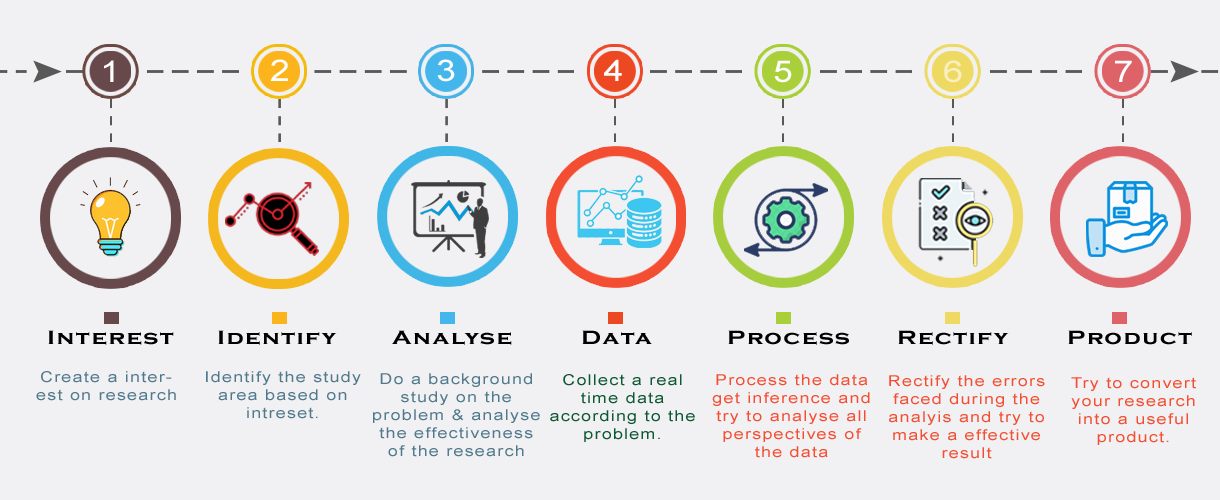
<style>
.page{position:relative;width:1220px;height:500px;background:#f1f1f3}
.page>*{position:absolute;margin:0}
.t1{font:30px "ArialMT";letter-spacing:0.08em;color:#ffffff;scale:1.2 1}
.t2{font:30px "ArialMT";letter-spacing:0.08em;color:#f8f0c1;scale:1.2 1}
.t3{font:20px "CopperplateGothic-Bold";letter-spacing:0.08em;color:#000000;scale:1.2 1}
.t4{font:15px "ArialMT";letter-spacing:0.08em;color:#50798c;scale:1.2 1}
.t5{font:15px "ArialMT";letter-spacing:0.08em;color:#0e5733;scale:1.2 1}
.t6{font:15px "ArialMT";letter-spacing:0.08em;color:#f34e32;scale:1.2 1}
</style>
<div class="page">
<p class="t1" style="left:104px;top:60px;width:10px;height:22px">1</p>
<p class="t1" style="left:271px;top:59px;width:17px;height:22px">2</p>
<p class="t1" style="left:437px;top:59px;width:18px;height:23px">3</p>
<p class="t1" style="left:604px;top:59px;width:18px;height:22px">4</p>
<p class="t1" style="left:774px;top:60px;width:18px;height:23px">5</p>
<p class="t2" style="left:944px;top:60px;width:18px;height:23px">6</p>
<p class="t1" style="left:1115px;top:60px;width:17px;height:22px">7</p>
<p class="t3" style="left:48px;top:330px;width:126px;height:15px">Interest</p>
<p class="t3" style="left:218px;top:330px;width:119px;height:15px">Identify</p>
<p class="t3" style="left:392px;top:330px;width:120px;height:15px">Analyse</p>
<p class="t3" style="left:582px;top:330px;width:70px;height:14px">Data</p>
<p class="t3" style="left:728px;top:330px;width:121px;height:15px">Process</p>
<p class="t3" style="left:898px;top:330px;width:111px;height:15px">Rectify</p>
<p class="t3" style="left:1068px;top:330px;width:124px;height:15px">Product</p>
<p class="t4" style="left:36px;top:371px;width:140px;height:30px;text-align:center">Create a interest on research</p>
<p class="t4" style="left:206px;top:371px;width:155px;height:48px;text-align:center">Identify the study area based on intreset.</p>
<p class="t4" style="left:373px;top:373px;width:167px;height:84px;text-align:center">Do a background study on the problem &amp; analyse the effectiveness of the research</p>
<p class="t5" style="left:550px;top:374px;width:145px;height:68px;text-align:center">Collect a real time data according to the problem.</p>
<p class="t6" style="left:712px;top:374px;width:158px;height:84px;text-align:center">Process the data get inference and try to analyse all perspectives of the data</p>
<p class="t6" style="left:889px;top:375px;width:156px;height:84px;text-align:center">Rectify the errors faced during the analyis and try to make a effective result</p>
<p class="t6" style="left:1071px;top:377px;width:125px;height:68px;text-align:center">Try to convert your research into a useful product.</p>
</div>
